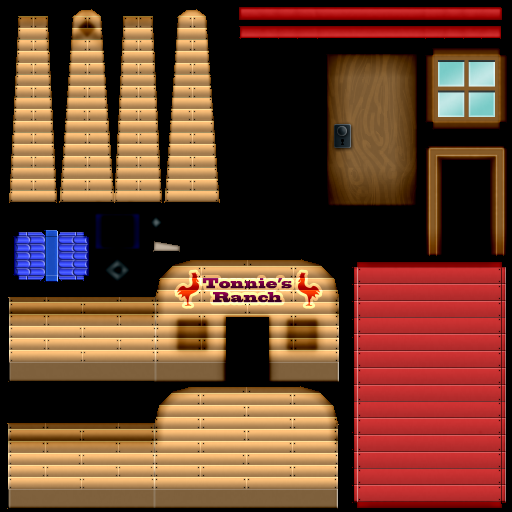
<style>
.page{position:relative;width:512px;height:512px;background:#000000}
.page>*{position:absolute;margin:0}
.t1{font:12.5px/14.7px "BlackoakStd";font-weight:bold;scale:0.69 1}
</style>
<div class="page">
<p class="t1" style="left:202px;top:278px;width:90px;height:25px;text-align:center">Tonnie’s<br>Ranch</p>
</div>
